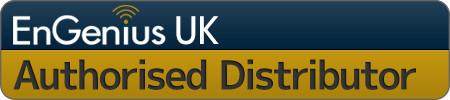
<style>
.page{position:relative;width:450px;height:100px}
.page>*{position:absolute;margin:0}
.t1{font:38px "mplus-2p-medium";color:#ffffff;scale:0.9 1}
.t2{font:40px "mplus-2p-bold";letter-spacing:-0.04em;color:#333333}
</style>
<div class="page">
<p class="t1" style="left:176px;top:16px;width:43px;height:29px">UK</p>
<p class="t2" style="left:13px;top:59px;width:403px;height:31px">Authorised Distributor</p>
</div>
